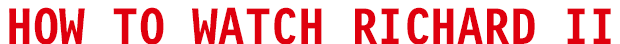
<style>
.page{position:relative;width:620px;height:44px;background:#ffffff}
.page>*{position:absolute;margin:0}
.t1{font:53px "LetterGothic12PitchBT-Bold";color:#df000e;text-transform:uppercase}
</style>
<div class="page">
<p class="t1" style="left:9px;top:7px;width:602px;height:38px">How to Watch Richard II</p>
</div>
